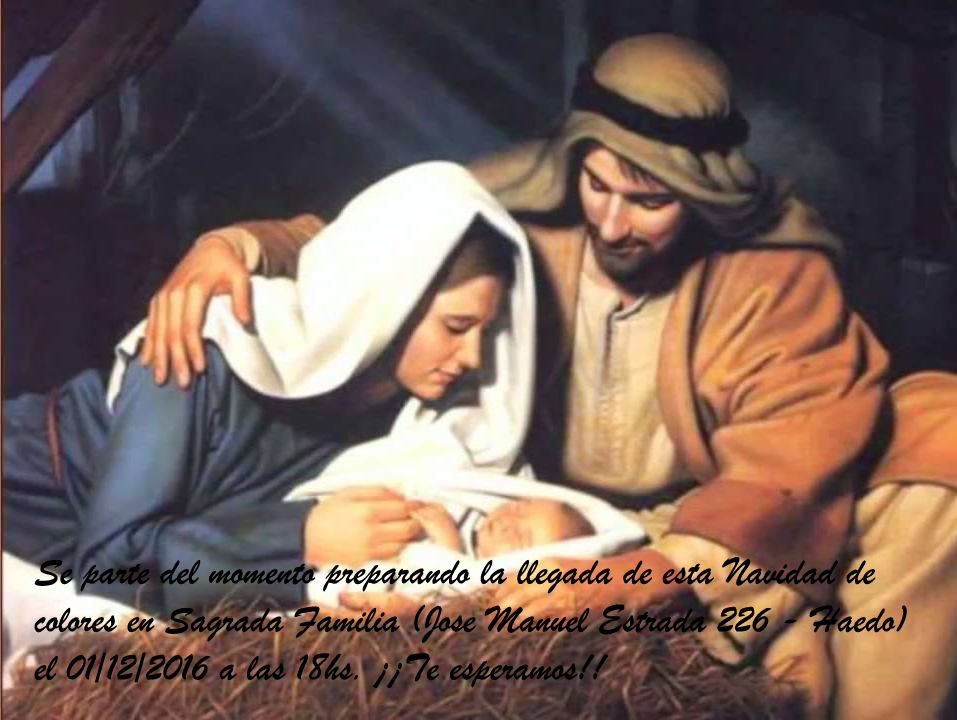
<style>
.page{position:relative;width:957px;height:720px}
.page>*{position:absolute;margin:0}
.t1{font:40px "BrushScriptMT";color:#000000}
</style>
<div class="page">
<p class="t1" style="left:34px;top:557px;width:873px;height:131px">Se parte del momento preparando la llegada de esta Navidad de<br>colores en Sagrada Familia (Jose Manuel Estrada 226 - Haedo)<br>el 01/12/2016 a las 18hs. ¡¡Te esperamos!!</p>
</div>
